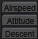
<style>
.page{position:relative;width:38px;height:39px}
.page>*{position:absolute;margin:0}
.t1{font:8px "ArialMT";color:#161617}
</style>
<div class="page">
<p class="t1" style="left:3px;top:5px;width:33px;height:8px">Airspeed</p>
<p class="t1" style="left:6px;top:17px;width:28px;height:7px">Attitude</p>
<p class="t1" style="left:5px;top:30px;width:30px;height:7px">Descent</p>
</div>
